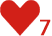
<style>
.page{position:relative;width:52px;height:36px;background:#d22018}
.page>*{position:absolute;margin:0}
.t1{font:23.4px "MyriadPro-Regular";letter-spacing:-0.1em;color:#d22018;font-weight:bold}
</style>
<div class="page">
<p class="t1" style="left:40px;top:19px;width:11px;height:17px">7</p>
</div>
